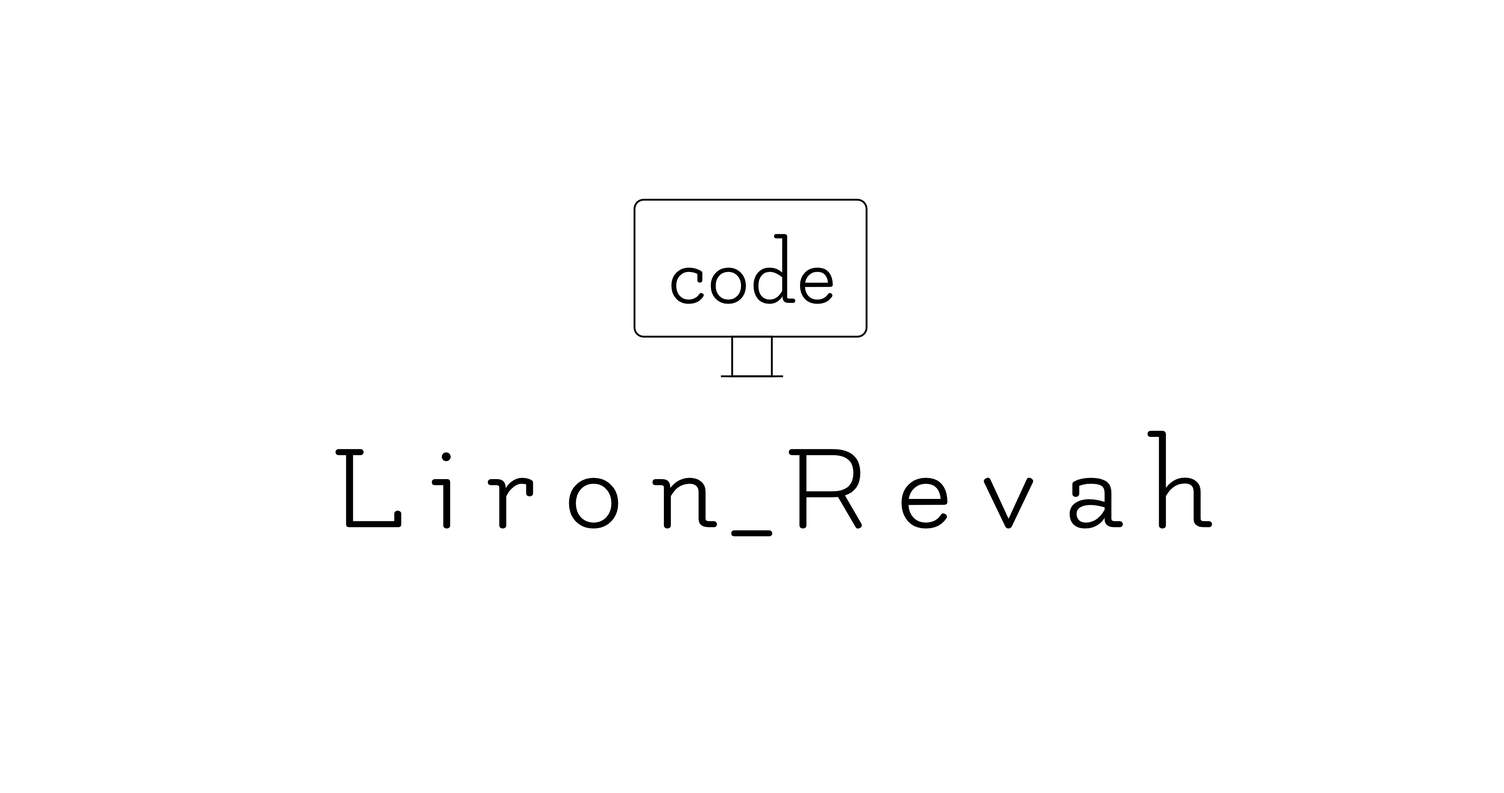
<style>
.page{position:relative;width:1504px;height:793px;background:#ffffff}
.page>*{position:absolute;margin:0}
.t1{font:91.8px "Flamenco-Regular";color:#000000}
.t2{font:128.5px "Flamenco-Regular";color:#000000}
</style>
<div class="page">
<p class="t1" style="left:671px;top:234px;width:162px;height:70px">code</p>
<p class="t2" style="left:335px;top:431px;width:877px;height:105px">L i r o n_R e v a h</p>
</div>
